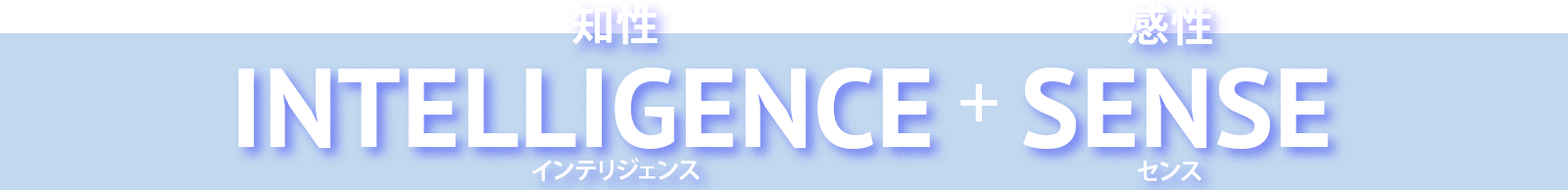
<style>
.page{position:relative;width:1568px;height:190px;background:#c1d8ef}
.page>*{position:absolute;margin:0}
.t1{font:43.3px "KozGoPr6N-Bold";letter-spacing:0.01em;color:#ffffff}
.t2{font:111.3px "PTSans-Bold";letter-spacing:0.01em;color:#ffffff}
.t3{font:62.1px "KozGoPr6N-Bold";letter-spacing:0.01em;color:#ffffff}
.t4{font:24.2px "KozGoPr6N-Bold";letter-spacing:0.01em;color:#ffffff}
</style>
<div class="page">
<p class="t1" style="left:571px;top:3px;width:87px;height:42px">知性</p>
<p class="t1" style="left:1127px;top:3px;width:85px;height:43px">感性</p>
<p class="t2" style="left:238px;top:68px;width:692px;height:81px">INTELLIGENCE</p>
<p class="t2" style="left:1023px;top:68px;width:305px;height:81px">SENSE</p>
<p class="t3" style="left:960px;top:83px;width:38px;height:39px">+</p>
<p class="t4" style="left:531px;top:158px;width:169px;height:23px">インテリジェンス</p>
<p class="t4" style="left:1137px;top:161px;width:65px;height:20px">センス</p>
</div>
